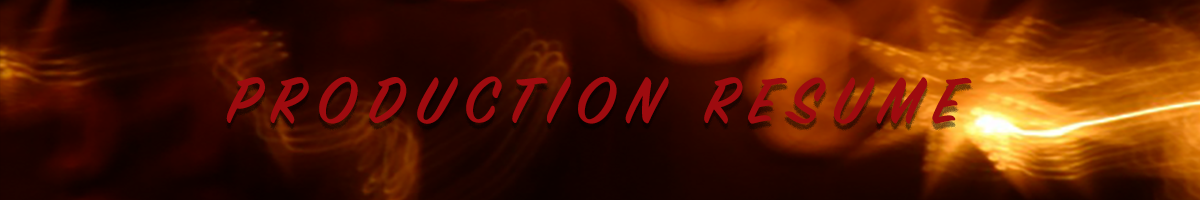
<style>
.page{position:relative;width:1200px;height:200px}
.page>*{position:absolute;margin:0}
.t1{font:71.5px "SignPainter-HouseScriptSemibold";letter-spacing:0.2em;color:#9e0b0f}
</style>
<div class="page">
<p class="t1" style="left:226px;top:76px;width:746px;height:48px">PRODUCTION RESUME</p>
</div>
